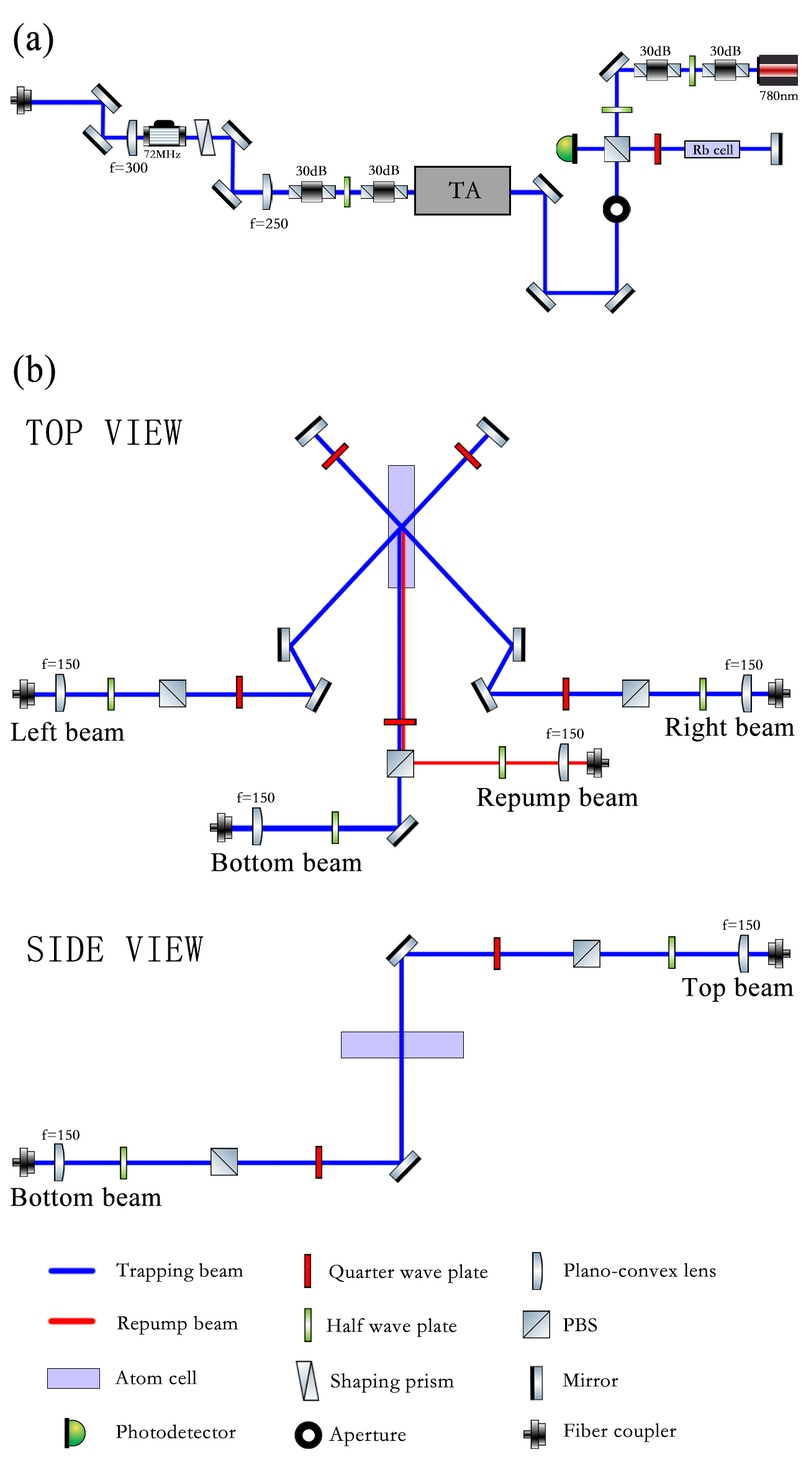
<style>
.page{position:relative;width:806px;height:1480px;background:#ffffff}
.page>*{position:absolute;margin:0}
.t1{font:38.6px "TimesNewRomanPSMT";color:#000000;font-weight:bold;scale:0.93 1}
.t2{font:14.7px "STFangsong";color:#000000;font-weight:bold}
.t3{font:13.8px "STFangsong";color:#000000;font-weight:bold}
.t4{font:14.4px "STFangsong";color:#000000;font-weight:bold}
.t5{font:12px "STFangsong";color:#000000;font-weight:bold}
.t6{font:15.3px "STFangsong";color:#000000;font-weight:bold}
.t7{font:24.8px "STFangsong";color:#000000;font-weight:bold}
.t8{font:37.6px "SimSun";color:#000000;font-weight:bold}
.t9{font:26.7px "TimesNewRomanPSMT";color:#000000;font-weight:bold}
.t10{font:20.4px "STFangsong";color:#000000;font-weight:bold}
.t11{font:21.1px "STFangsong";color:#000000;font-weight:bold}
</style>
<div class="page">
<p class="t1" style="left:14px;top:23px;width:39px;height:35px">(a)</p>
<p class="t2" style="left:640px;top:45px;width:31px;height:11px">30dB</p>
<p class="t2" style="left:710px;top:45px;width:31px;height:11px">30dB</p>
<p class="t3" style="left:760px;top:91px;width:38px;height:10px">780nm</p>
<p class="t4" style="left:692px;top:145px;width:41px;height:10px">Rb cell</p>
<p class="t5" style="left:144px;top:150px;width:37px;height:8px">72MHz</p>
<p class="t6" style="left:109px;top:162px;width:39px;height:11px">f=300</p>
<p class="t2" style="left:296px;top:165px;width:31px;height:11px">30dB</p>
<p class="t2" style="left:368px;top:165px;width:31px;height:10px">30dB</p>
<p class="t7" style="left:448px;top:181px;width:34px;height:18px">TA</p>
<p class="t6" style="left:250px;top:218px;width:38px;height:11px">f=250</p>
<p class="t1" style="left:14px;top:355px;width:41px;height:35px">(b)</p>
<p class="t8" style="left:25px;top:419px;width:158px;height:26px">TOP VIEW</p>
<p class="t6" style="left:42px;top:658px;width:37px;height:11px">f=150</p>
<p class="t6" style="left:725px;top:659px;width:37px;height:11px">f=150</p>
<p class="t9" style="left:11px;top:721px;width:114px;height:20px">Left beam</p>
<p class="t9" style="left:664px;top:717px;width:131px;height:24px">Right beam</p>
<p class="t6" style="left:546px;top:728px;width:38px;height:11px">f=150</p>
<p class="t6" style="left:237px;top:792px;width:37px;height:11px">f=150</p>
<p class="t9" style="left:476px;top:787px;width:162px;height:25px">Repump beam</p>
<p class="t9" style="left:210px;top:852px;width:153px;height:20px">Bottom beam</p>
<p class="t6" style="left:722px;top:919px;width:38px;height:11px">f=150</p>
<p class="t8" style="left:27px;top:936px;width:177px;height:26px">SIDE VIEW</p>
<p class="t9" style="left:682px;top:977px;width:112px;height:25px">Top beam</p>
<p class="t6" style="left:42px;top:1129px;width:37px;height:11px">f=150</p>
<p class="t9" style="left:10px;top:1187px;width:152px;height:19px">Bottom beam</p>
<p class="t10" style="left:116px;top:1262px;width:127px;height:20px">Trapping beam</p>
<p class="t10" style="left:329px;top:1264px;width:158px;height:19px">Quarter wave plate</p>
<p class="t10" style="left:563px;top:1262px;width:153px;height:15px">Plano-convex lens</p>
<p class="t10" style="left:117px;top:1315px;width:121px;height:19px">Repump beam</p>
<p class="t10" style="left:326px;top:1318px;width:131px;height:19px">Half wave plate</p>
<p class="t10" style="left:563px;top:1318px;width:34px;height:13px">PBS</p>
<p class="t10" style="left:115px;top:1370px;width:82px;height:14px">Atom cell</p>
<p class="t11" style="left:331px;top:1373px;width:123px;height:20px">Shaping prism</p>
<p class="t10" style="left:563px;top:1373px;width:55px;height:13px">Mirror</p>
<p class="t10" style="left:115px;top:1424px;width:121px;height:15px">Photodetector</p>
<p class="t11" style="left:328px;top:1426px;width:78px;height:20px">Aperture</p>
<p class="t10" style="left:563px;top:1422px;width:113px;height:20px">Fiber coupler</p>
</div>
